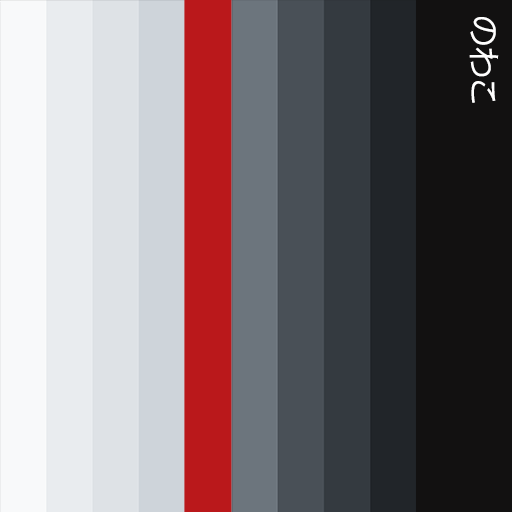
<style>
.page{position:relative;width:512px;height:512px}
.page>*{position:absolute;margin:0}
.t1{font:32px "KozGoPr6N-Regular";color:#ffffff}
</style>
<div class="page">
<p class="t1" style="left:469px;top:17px;width:30px;height:86px;rotate:90deg">のわこ</p>
</div>
